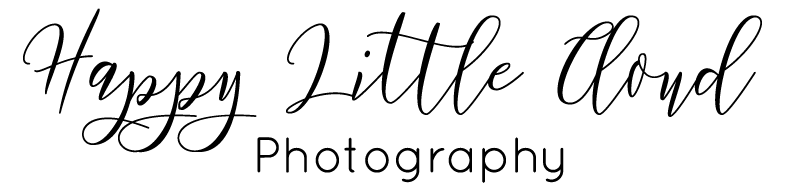
<style>
.page{position:relative;width:785px;height:192px;background:#ffffff}
.page>*{position:absolute;margin:0}
.t1{font:150px "FrutillaScript-Regular";color:#000000}
.t2{font:50px "QuicksandBook-Regular";color:#000000}
</style>
<div class="page">
<p class="t1" style="left:23px;top:8px;width:739px;height:145px">Happy Little Cloud</p>
<p class="t2" style="left:257px;top:137px;width:307px;height:46px">Photography</p>
</div>
